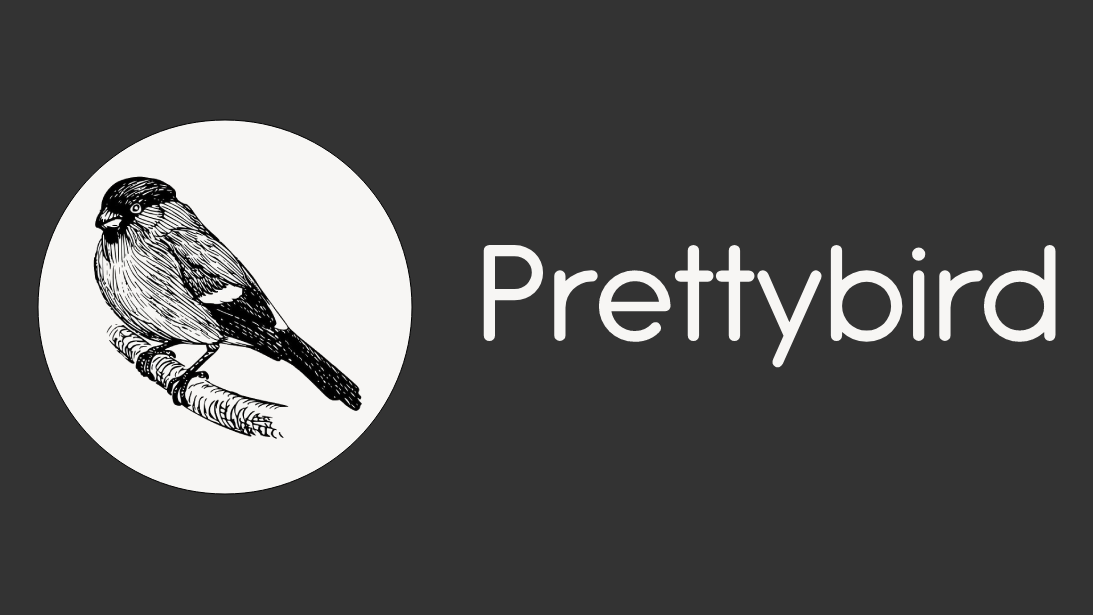
<style>
.page{position:relative;width:1093px;height:615px;background:#333333}
.page>*{position:absolute;margin:0}
.t1{font:150px "AntipastoPro-Medium";color:#f7f6f4}
</style>
<div class="page">
<p class="t1" style="left:483px;top:245px;width:573px;height:123px">Prettybird</p>
</div>
